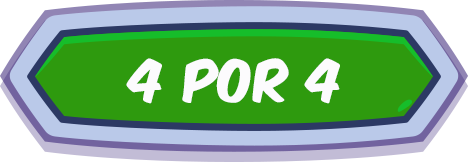
<style>
.page{position:relative;width:469px;height:162px;background:#2e9a0e}
.page>*{position:absolute;margin:0}
.t1{font:50px "KomikaAxis";color:#fcfbfd}
</style>
<div class="page">
<p class="t1" style="left:126px;top:58px;width:214px;height:46px">4 por 4</p>
</div>
